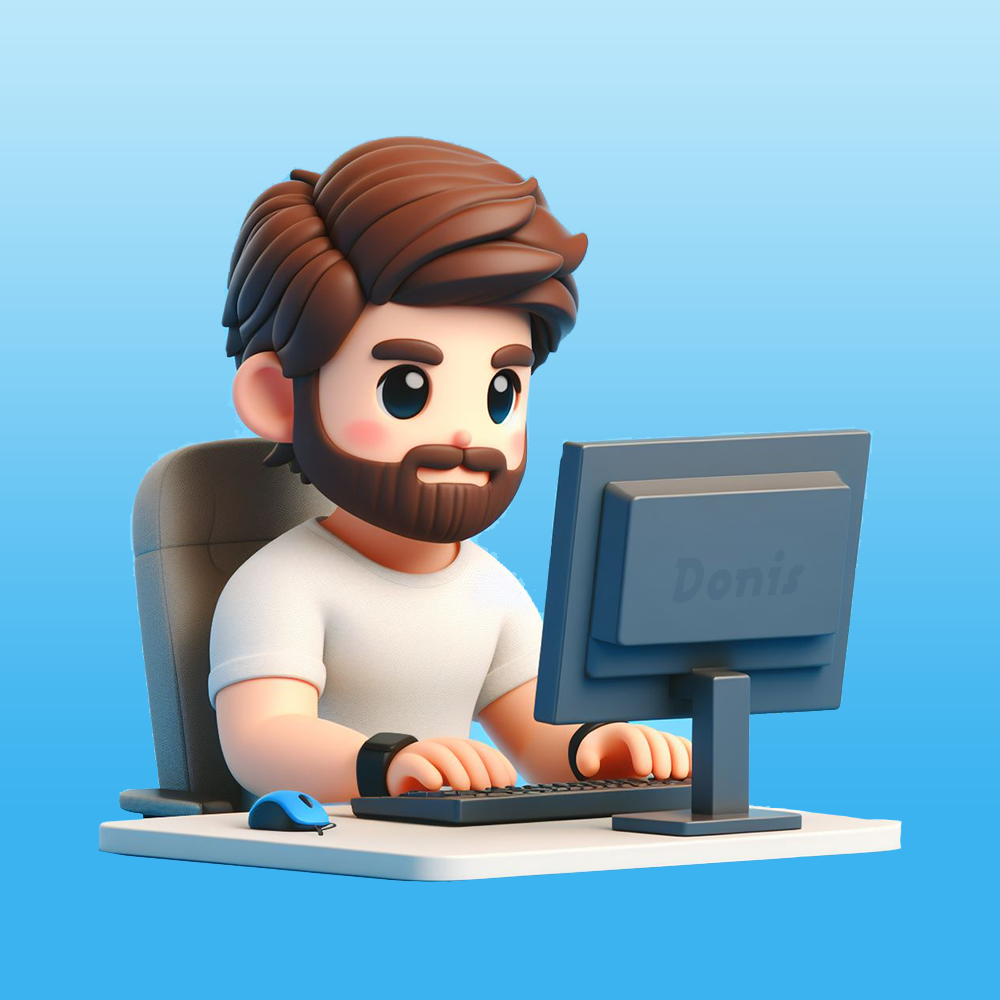
<style>
.page{position:relative;width:1000px;height:1000px}
.page>*{position:absolute;margin:0}
.t1{font:64.4px "AshbyBlack";color:#506f85;scale:0.75 1}
</style>
<div class="page">
<p class="t1" style="left:672px;top:549px;width:134px;height:54px;rotate:-4deg">Donis</p>
</div>
